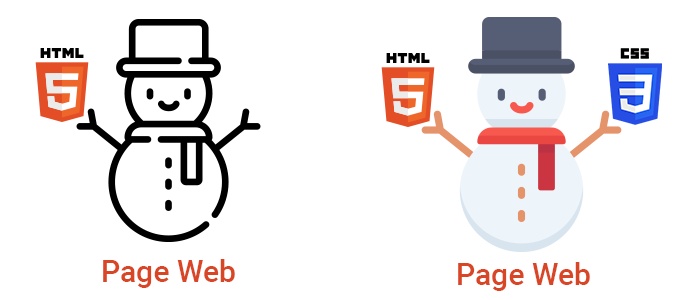
<style>
.page{position:relative;width:700px;height:300px;background:#ffffff}
.page>*{position:absolute;margin:0}
.t1{font:30px "Roboto-Medium";color:#d94625}
</style>
<div class="page">
<p class="t1" style="left:103px;top:259px;width:132px;height:29px">Page Web</p>
<p class="t1" style="left:458px;top:262px;width:132px;height:29px">Page Web</p>
</div>
